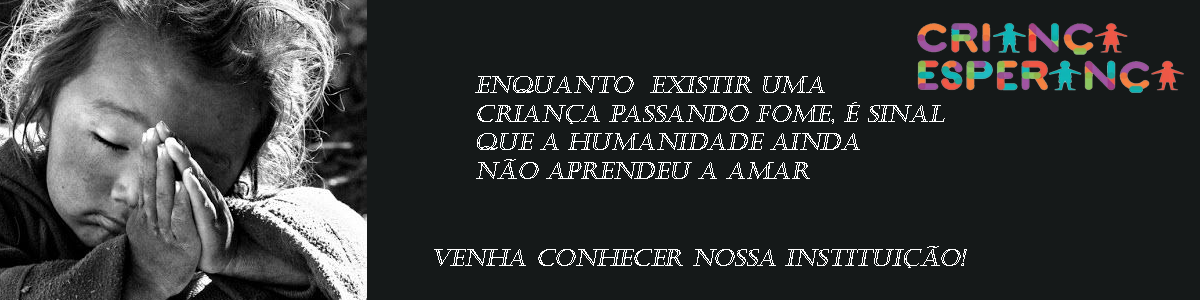
<style>
.page{position:relative;width:1200px;height:300px;background:#151919}
.page>*{position:absolute;margin:0}
.t1{font:24px "Castellar";color:#ffffff;text-transform:uppercase;font-style:italic}
</style>
<div class="page">
<p class="t1" style="left:475px;top:76px;width:470px;height:103px">ENQUANTO  EXISTIR UMA<br>CRIANÇA PASSANDO FOME, É SINAL<br>QUE A HUMANIDADE AINDA<br>NÃO APRENDEU A AMAR</p>
<p class="t1" style="left:434px;top:246px;width:533px;height:22px">venha conhecer nossa instituição!</p>
</div>
